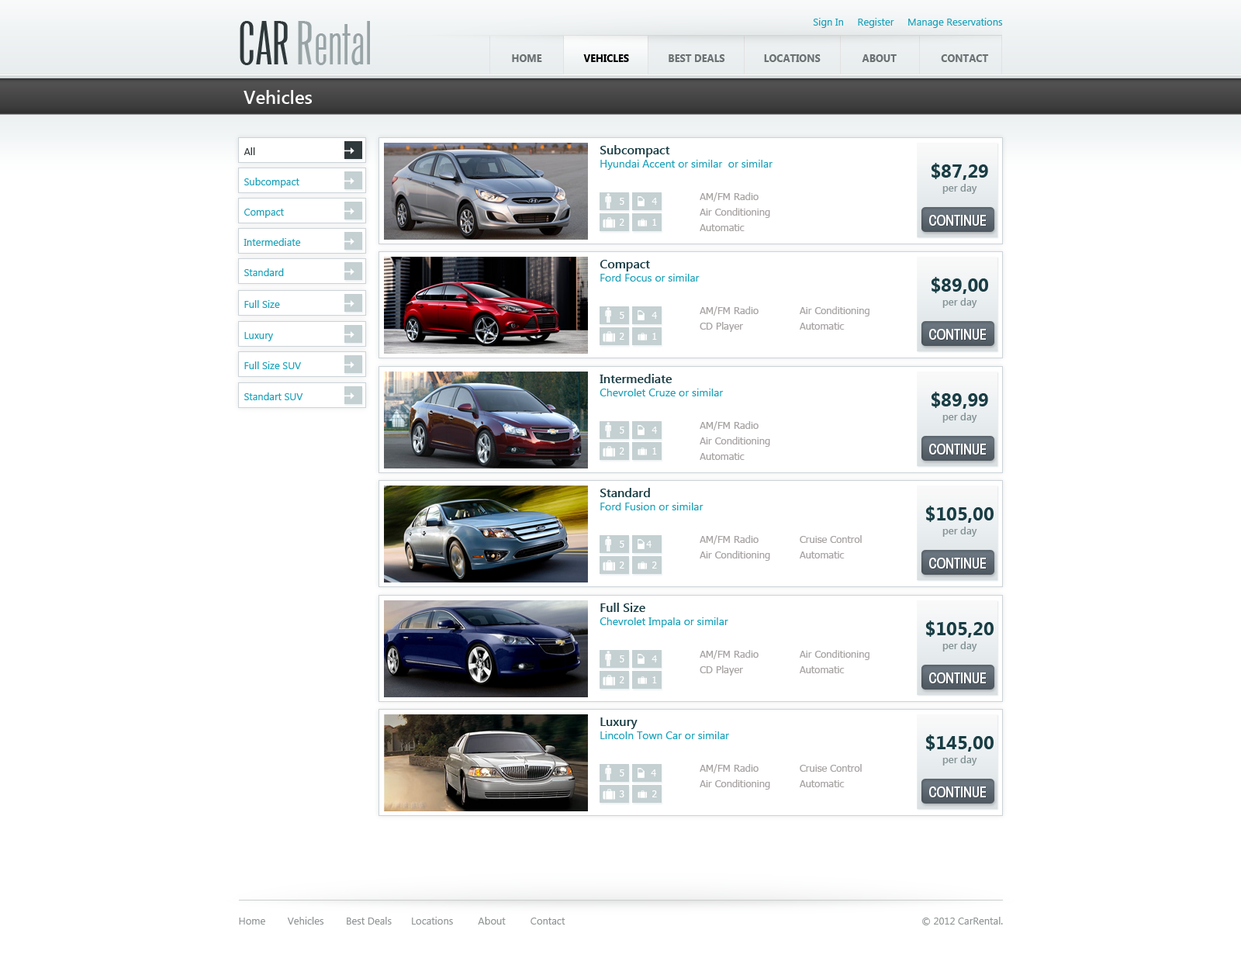
<style>
.page{position:relative;width:1241px;height:961px;background:#ffffff}
.page>*{position:absolute;margin:0}
.t1{font:10.1px "SegoeUI";color:#1aa1b9}
.t2{font:55.8px "Arizona";color:#99a4a6}
.t3{font:55.8px "Arizona";color:#2f383a;text-transform:uppercase}
.t4{font:10.1px "SegoeUI-Bold";color:#6c7273;text-transform:uppercase}
.t5{font:10.1px "SegoeUI-Bold";color:#000000;text-transform:uppercase}
.t6{font:18.6px "SegoeUI-SemiBold";color:#fefefe}
.t7{font:10.1px "SegoeUI";color:#2f383a}
.t8{font:10.9px "SegoeUI";color:#1aa1b9}
.t9{font:12.4px "SegoeUI-SemiBold";color:#193d44}
.t10{font:10.1px/14px "SegoeUI-SemiBold";color:#859497}
.t11{font:18.6px/14px "SegoeUI-Bold";color:#193d44}
.t12{font:9.3px "Tahoma";color:#ffffff}
.t13{font:10.1px/15.5px "Tahoma";color:#a9a4a4}
.t14{font:14px "AvantGardeITCbyBT-MediumCond";color:#ffffff;text-transform:uppercase}
.t15{font:10.1px "SegoeUI";color:#909596}
</style>
<div class="page">
<p class="t1" style="left:813px;top:18px;width:190px;height:10px">Sign In     Register     Manage Reservations</p>
<p class="t2" style="left:240px;top:21px;width:130px;height:44px"><span class="t3">Car</span> Rental</p>
<p class="t4" style="left:512px;top:54px;width:477px;height:8px">Home              <span class="t5"> Vehicles              </span>Best Deals              Locations               About                Contact</p>
<p class="t6" style="left:244px;top:90px;width:68px;height:14px">Vehicles</p>
<p class="t7" style="left:244px;top:147px;width:11px;height:8px">All</p>
<p class="t8" style="left:600px;top:145px;width:172px;height:25px"><span class="t9">Subcompact <br></span>Hyundai Accent or similar  or similar</p>
<p class="t10" style="left:931px;top:163px;width:57px;height:31px;text-align:center"><span class="t11">$87,29<br></span>per day</p>
<p class="t1" style="left:244px;top:178px;width:55px;height:10px">Subcompact</p>
<p class="t12" style="left:620px;top:198px;width:4px;height:7px">5</p>
<p class="t12" style="left:651px;top:198px;width:6px;height:7px">4</p>
<p class="t13" style="left:700px;top:192px;width:70px;height:39px">AM/FM Radio<br>Air Conditioning<br>Automatic</p>
<p class="t1" style="left:244px;top:209px;width:40px;height:9px">Compact</p>
<p class="t12" style="left:620px;top:219px;width:4px;height:7px">2</p>
<p class="t12" style="left:652px;top:219px;width:5px;height:7px">1</p>
<p class="t14" style="left:929px;top:215px;width:57px;height:11px">Continue</p>
<p class="t1" style="left:244px;top:238px;width:57px;height:8px">Intermediate</p>
<p class="t1" style="left:244px;top:268px;width:40px;height:8px">Standard</p>
<p class="t8" style="left:600px;top:260px;width:100px;height:22px"><span class="t9">Compact<br></span>Ford Focus or similar</p>
<p class="t10" style="left:931px;top:277px;width:57px;height:31px;text-align:center"><span class="t11">$89,00<br></span>per day</p>
<p class="t1" style="left:244px;top:300px;width:36px;height:8px">Full Size</p>
<p class="t12" style="left:620px;top:312px;width:4px;height:7px">5</p>
<p class="t12" style="left:651px;top:312px;width:6px;height:7px">4</p>
<p class="t13" style="left:700px;top:306px;width:59px;height:26px">AM/FM Radio<br>CD Player</p>
<p class="t13" style="left:800px;top:306px;width:69px;height:24px">Air Conditioning<br>Automatic</p>
<p class="t14" style="left:929px;top:329px;width:57px;height:11px">Continue</p>
<p class="t1" style="left:244px;top:332px;width:29px;height:9px">Luxury</p>
<p class="t12" style="left:620px;top:333px;width:4px;height:7px">2</p>
<p class="t12" style="left:652px;top:333px;width:5px;height:7px">1</p>
<p class="t1" style="left:244px;top:361px;width:57px;height:8px">Full Size SUV</p>
<p class="t8" style="left:600px;top:374px;width:124px;height:22px"><span class="t9">Intermediate<br></span>Chevrolet Cruze or similar</p>
<p class="t1" style="left:244px;top:392px;width:59px;height:8px">Standart SUV</p>
<p class="t10" style="left:931px;top:392px;width:57px;height:31px;text-align:center"><span class="t11">$89,99<br></span>per day</p>
<p class="t13" style="left:700px;top:421px;width:70px;height:39px">AM/FM Radio<br>Air Conditioning<br>Automatic</p>
<p class="t12" style="left:620px;top:427px;width:4px;height:7px">5</p>
<p class="t12" style="left:651px;top:427px;width:6px;height:7px">4</p>
<p class="t12" style="left:620px;top:448px;width:4px;height:6px">2</p>
<p class="t12" style="left:652px;top:448px;width:5px;height:6px">1</p>
<p class="t14" style="left:929px;top:444px;width:57px;height:10px">Continue</p>
<p class="t8" style="left:600px;top:488px;width:103px;height:22px"><span class="t9">Standard <br></span>Ford Fusion or similar</p>
<p class="t11" style="left:925px;top:506px;width:69px;height:31px;text-align:center">$105,00<br><span class="t10">per day</span></p>
<p class="t12" style="left:620px;top:541px;width:4px;height:7px">5</p>
<p class="t12" style="left:646px;top:541px;width:5px;height:7px">4</p>
<p class="t13" style="left:700px;top:535px;width:70px;height:26px">AM/FM Radio<br>Air Conditioning</p>
<p class="t13" style="left:800px;top:535px;width:62px;height:23px">Cruise Control<br>Automatic</p>
<p class="t14" style="left:929px;top:558px;width:57px;height:10px">Continue</p>
<p class="t12" style="left:620px;top:562px;width:4px;height:6px">2</p>
<p class="t12" style="left:652px;top:562px;width:5px;height:6px">2</p>
<p class="t8" style="left:600px;top:603px;width:128px;height:24px"><span class="t9">Full Size<br></span>Chevrolet Impala or similar</p>
<p class="t11" style="left:925px;top:620px;width:69px;height:31px;text-align:center">$105,20<br><span class="t10">per day</span></p>
<p class="t13" style="left:700px;top:650px;width:59px;height:26px">AM/FM Radio<br>CD Player</p>
<p class="t13" style="left:800px;top:650px;width:69px;height:23px">Air Conditioning<br>Automatic</p>
<p class="t12" style="left:620px;top:655px;width:4px;height:7px">5</p>
<p class="t12" style="left:651px;top:655px;width:6px;height:7px">4</p>
<p class="t12" style="left:620px;top:676px;width:4px;height:7px">2</p>
<p class="t12" style="left:652px;top:676px;width:5px;height:7px">1</p>
<p class="t14" style="left:929px;top:672px;width:57px;height:11px">Continue</p>
<p class="t8" style="left:600px;top:717px;width:129px;height:22px"><span class="t9">Luxury <br></span>Lincoln Town Car or similar</p>
<p class="t11" style="left:925px;top:734px;width:69px;height:31px;text-align:center">$145,00<br><span class="t10">per day</span></p>
<p class="t12" style="left:620px;top:769px;width:4px;height:7px">5</p>
<p class="t12" style="left:651px;top:769px;width:5px;height:7px">4</p>
<p class="t13" style="left:700px;top:764px;width:70px;height:26px">AM/FM Radio<br>Air Conditioning</p>
<p class="t13" style="left:800px;top:764px;width:62px;height:23px">Cruise Control<br>Automatic</p>
<p class="t12" style="left:619px;top:790px;width:5px;height:7px">3</p>
<p class="t12" style="left:652px;top:790px;width:5px;height:7px">2</p>
<p class="t14" style="left:929px;top:786px;width:57px;height:11px">Continue</p>
<p class="t15" style="left:239px;top:917px;width:326px;height:7px">Home        Vehicles        Best Deals       Locations         About         Contact</p>
<p class="t15" style="left:922px;top:917px;width:81px;height:8px">© 2012 CarRental.</p>
</div>
